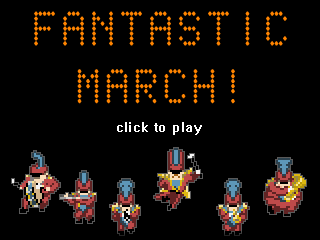
<style>
.page{position:relative;width:320px;height:240px;background:#000000}
.page>*{position:absolute;margin:0}
.t1{font:48px "ScoreBoard";letter-spacing:0.075em;color:#ff8400}
.t2{font:10px "System";letter-spacing:0.075em;color:#ffffff}
</style>
<div class="page">
<p class="t1" style="left:34px;top:11px;width:253px;height:93px;text-align:center">FANTASTIC<br>MARCH!</p>
<p class="t2" style="left:117px;top:122px;width:85px;height:13px">click to play</p>
</div>
